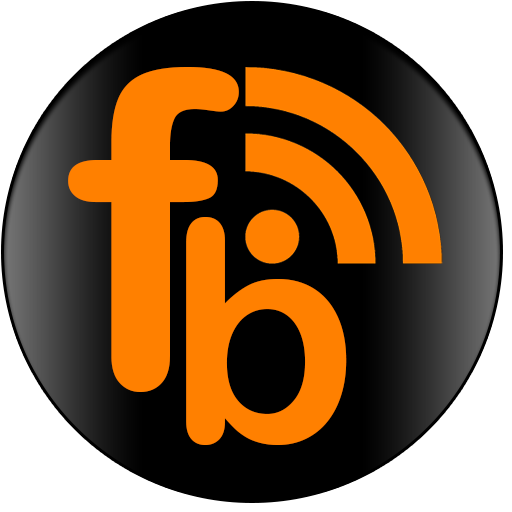
<style>
.page{position:relative;width:512px;height:512px;background:#ffffff}
.page>*{position:absolute;margin:0}
.t1{font:438.6px "ArialRoundedMTBold";color:#ff8000}
.t2{font:307px "ArialRoundedMTBold";color:#ff8000}
</style>
<div class="page">
<p class="t1" style="left:68px;top:67px;width:171px;height:325px">f</p>
<p class="t2" style="left:186px;top:217px;width:161px;height:228px">b</p>
</div>
